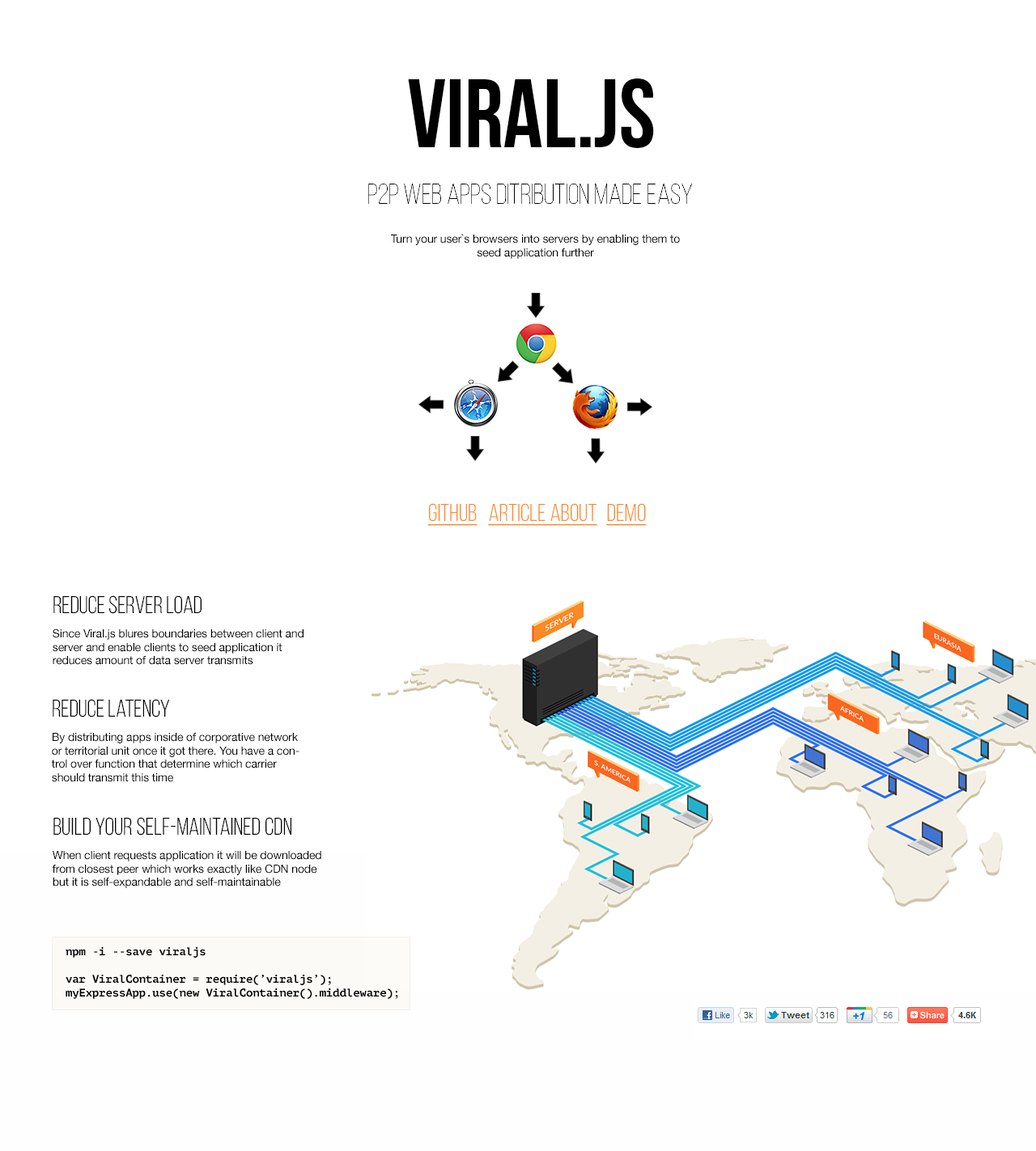
<style>
.page{position:relative;width:1036px;height:1151px;background:#ffffff}
.page>*{position:absolute;margin:0}
.t1{font:97.1px "BebasNeue";color:#000000}
.t2{font:29.1px "BebasNeue-Thin";color:#000000}
.t3{font:11.3px "HelveticaNeue";letter-spacing:-0.01em;color:#000000}
.t4{font:24.3px "BebasNeueBook";color:#fb8a25;text-decoration:underline}
.t5{font:24.3px "BebasNeueBook";letter-spacing:-0.01em;color:#000000}
.t6{font:11.3px/24.3px "HelveticaNeue";letter-spacing:-0.01em;color:#000000}
.t7{font:24.3px "BebasNeueBook";color:#000000}
.t8{font:11.3px "PTMono-Bold";letter-spacing:-0.01em;color:#000000}
</style>
<div class="page">
<p class="t1" style="left:408px;top:78px;width:246px;height:70px">Viral.js</p>
<p class="t2" style="left:368px;top:184px;width:324px;height:20px">P2P Web apps ditribution made easy</p>
<p class="t3" style="left:391px;top:234px;width:289px;height:25px;text-align:center">Turn your user`s browsers into servers by enabling them to seed application further</p>
<p class="t4" style="left:427px;top:503px;width:219px;height:23px">GITHUB   ARTICLE ABOUT  DEMO</p>
<p class="t3" style="left:53px;top:596px;width:250px;height:69px"><span class="t5">Reduce server load<br></span><span class="t6">Since Viral.js blures boundaries between client and </span>server and enable clients to seed application it reduces amount of data server transmits</p>
<p class="t3" style="left:51px;top:699px;width:248px;height:83px"><span class="t5">Reduce latency<br></span><span class="t6">By distributing apps inside of corporative network </span>or territorial unit once it got there. You have a control over function that determine which carrier should transmit this time</p>
<p class="t3" style="left:52px;top:817px;width:269px;height:71px"><span class="t7">Build your self-maintained CDN<br></span><span class="t6">When client requests application it will be downloaded </span>from closest peer which works exactly like CDN node but it is self-expandable and self-maintainable</p>
<p class="t8" style="left:66px;top:947px;width:332px;height:52px">npm -i --save viraljs<br><br>var ViralContainer = require(’viraljs’);<br>myExpressApp.use(new ViralContainer().middleware);</p>
</div>
